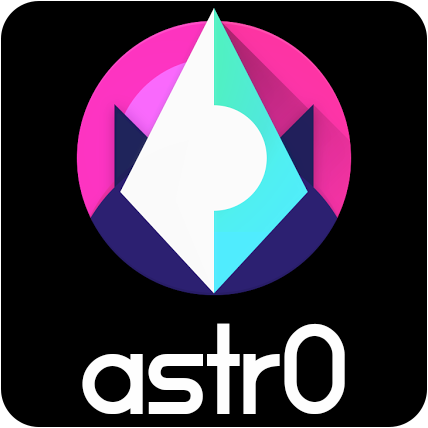
<style>
.page{position:relative;width:428px;height:428px;background:#000000}
.page>*{position:absolute;margin:0}
.t1{font:105px "StarAvenue";color:#fefefe}
</style>
<div class="page">
<p class="t1" style="left:82px;top:323px;width:263px;height:91px">Astr0</p>
</div>
